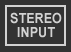
<style>
.page{position:relative;width:71px;height:52px;background:#333333}
.page>*{position:absolute;margin:0}
.t1{font:14px/3.5px "Arial-BoldMT";color:#d2d2d2;scale:0.9 1}
.t2{font:14px/14px "Arial-BoldMT";color:#d2d2d2;scale:0.9 1}
</style>
<div class="page">
<p class="t1" style="left:10px;top:12px;width:52px;height:26px;text-align:center">STEREO<span class="t2"><br>INPUT</span></p>
</div>
